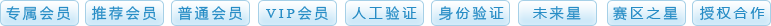
<style>
.page{position:relative;width:771px;height:26px}
.page>*{position:absolute;margin:0}
.t1{font:14px "SimSun";letter-spacing:0.2em;color:#268cc5}
.t2{font:14px "Sylfaen";letter-spacing:0.2em;color:#268cc5}
</style>
<div class="page">
<p class="t1" style="left:6px;top:6px;width:64px;height:15px">专属会员</p>
<p class="t1" style="left:92px;top:6px;width:64px;height:15px">推荐会员</p>
<p class="t1" style="left:178px;top:6px;width:64px;height:15px">普通会员</p>
<p class="t2" style="left:266px;top:6px;width:62px;height:15px">VIP<span class="t1">会员</span></p>
<p class="t1" style="left:352px;top:6px;width:65px;height:14px">人工验证</p>
<p class="t1" style="left:439px;top:6px;width:65px;height:14px">身份验证</p>
<p class="t1" style="left:533px;top:6px;width:48px;height:14px">未来星</p>
<p class="t1" style="left:613px;top:6px;width:65px;height:15px">赛区之星</p>
<p class="t1" style="left:700px;top:6px;width:65px;height:15px">授权合作</p>
</div>
